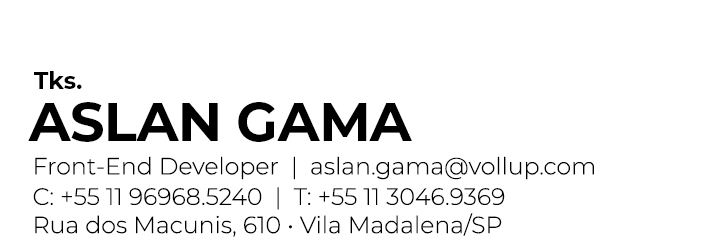
<style>
.page{position:relative;width:709px;height:249px;background:#ffffff}
.page>*{position:absolute;margin:0}
.t1{font:23.6px "Montserrat-Bold";color:#000000}
.t2{font:54.6px "Montserrat-Bold";letter-spacing:-0.012em;color:#000000;text-transform:uppercase}
.t3{font:23.6px/28.3px "Montserrat-Light";color:#000000}
</style>
<div class="page">
<p class="t1" style="left:34px;top:71px;width:48px;height:18px">Tks.</p>
<p class="t2" style="left:28px;top:102px;width:384px;height:40px">Aslan Gama</p>
<p class="t3" style="left:33px;top:156px;width:561px;height:81px">Front-End Developer  |  aslan.gama@vollup.com<br>C: +55 11 96968.5240  |  T: +55 11 3046.9369<br>Rua dos Macunis, 610 • Vila Madalena/SP</p>
</div>
